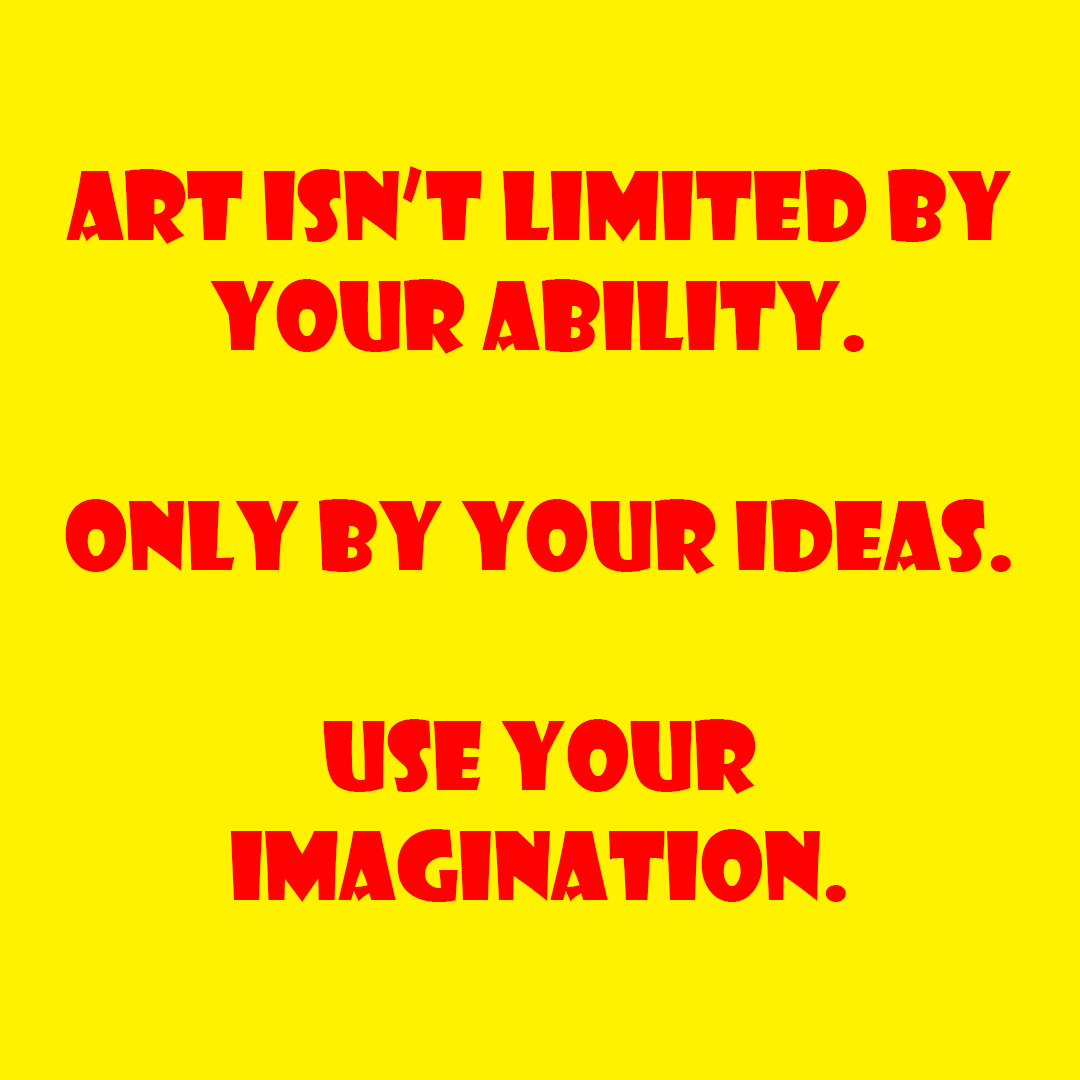
<style>
.page{position:relative;width:1080px;height:1080px;background:#fff200}
.page>*{position:absolute;margin:0}
.t1{font:91.7px "ShowcardGothic-Reg";color:#fe0101}
</style>
<div class="page">
<p class="t1" style="left:65px;top:166px;width:946px;height:736px;text-align:center">Art isn’t limited by your ability.<br><br>Only by your ideas.<br><br>Use your                     imagination.</p>
</div>
